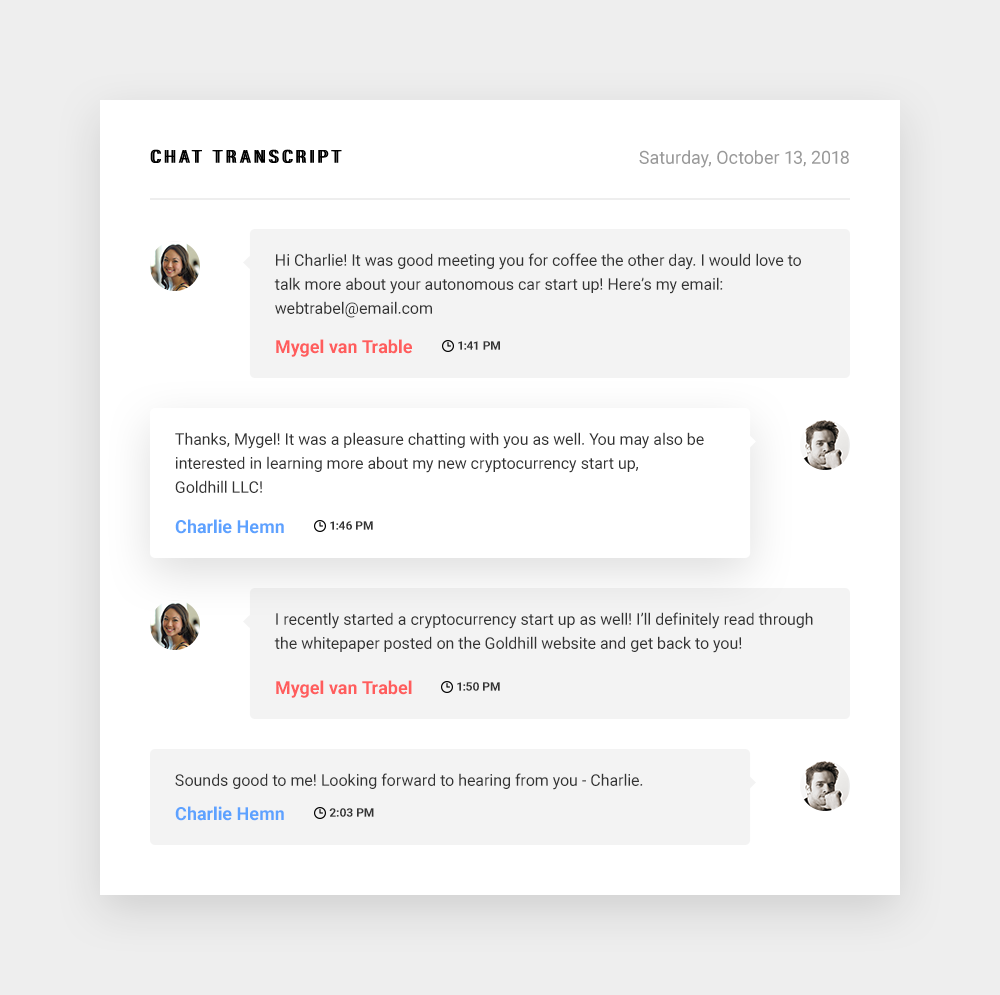
<style>
.page{position:relative;width:1000px;height:995px;background:#ffffff}
.page>*{position:absolute;margin:0}
.t1{font:18px "Roboto-Condensed";letter-spacing:0.215em;color:#000000}
.t2{font:18px "Roboto-Regular";color:#9a9a9a}
.t3{font:16px/24px "Roboto-Regular";color:#333333}
.t4{font:18px "Roboto-Bold";color:#ff5d5d}
.t5{font:12px "Roboto-Bold";color:#333333}
.t6{font:16px/24px "Helvetica";color:#333333}
.t7{font:18px "Roboto-Bold";color:#5da2ff}
.t8{font:16px "Roboto-Regular";color:#333333}
</style>
<div class="page">
<p class="t1" style="left:150px;top:149px;width:190px;height:14px">CHAT TRANSCRIPT</p>
<p class="t1" style="left:152px;top:149px;width:190px;height:14px">CHAT TRANSCRIPT</p>
<p class="t2" style="left:639px;top:150px;width:210px;height:18px">Saturday, October 13, 2018</p>
<p class="t3" style="left:274px;top:253px;width:527px;height:65px">Hi Charlie! It was good meeting you for coffee the other day. I would love to talk more about your autonomous car start up! Here’s my email: webtrabel@email.com</p>
<p class="t4" style="left:276px;top:339px;width:136px;height:18px">Mygel van Trable</p>
<p class="t5" style="left:458px;top:341px;width:42px;height:9px">1:41 PM</p>
<p class="t3" style="left:175px;top:432px;width:529px;height:61px">Thanks, Mygel! It was a pleasure chatting with you as well. You may also be interested in learning more about my new cryptocurrency start up, <span class="t6"><br><br></span>Goldhill LLC!</p>
<p class="t7" style="left:175px;top:519px;width:109px;height:15px">Charlie Hemn</p>
<p class="t5" style="left:330px;top:521px;width:43px;height:9px">1:46 PM</p>
<p class="t3" style="left:274px;top:612px;width:539px;height:41px">I recently started a cryptocurrency start up as well! I’ll definitely read through the whitepaper posted on the Goldhill website and get back to you!</p>
<p class="t4" style="left:276px;top:680px;width:136px;height:18px">Mygel van Trabel</p>
<p class="t5" style="left:457px;top:682px;width:43px;height:9px">1:50 PM</p>
<p class="t8" style="left:175px;top:773px;width:468px;height:17px">Sounds good to me! Looking forward to hearing from you - Charlie.</p>
<p class="t7" style="left:175px;top:806px;width:109px;height:15px">Charlie Hemn</p>
<p class="t5" style="left:329px;top:808px;width:45px;height:9px">2:03 PM</p>
</div>
